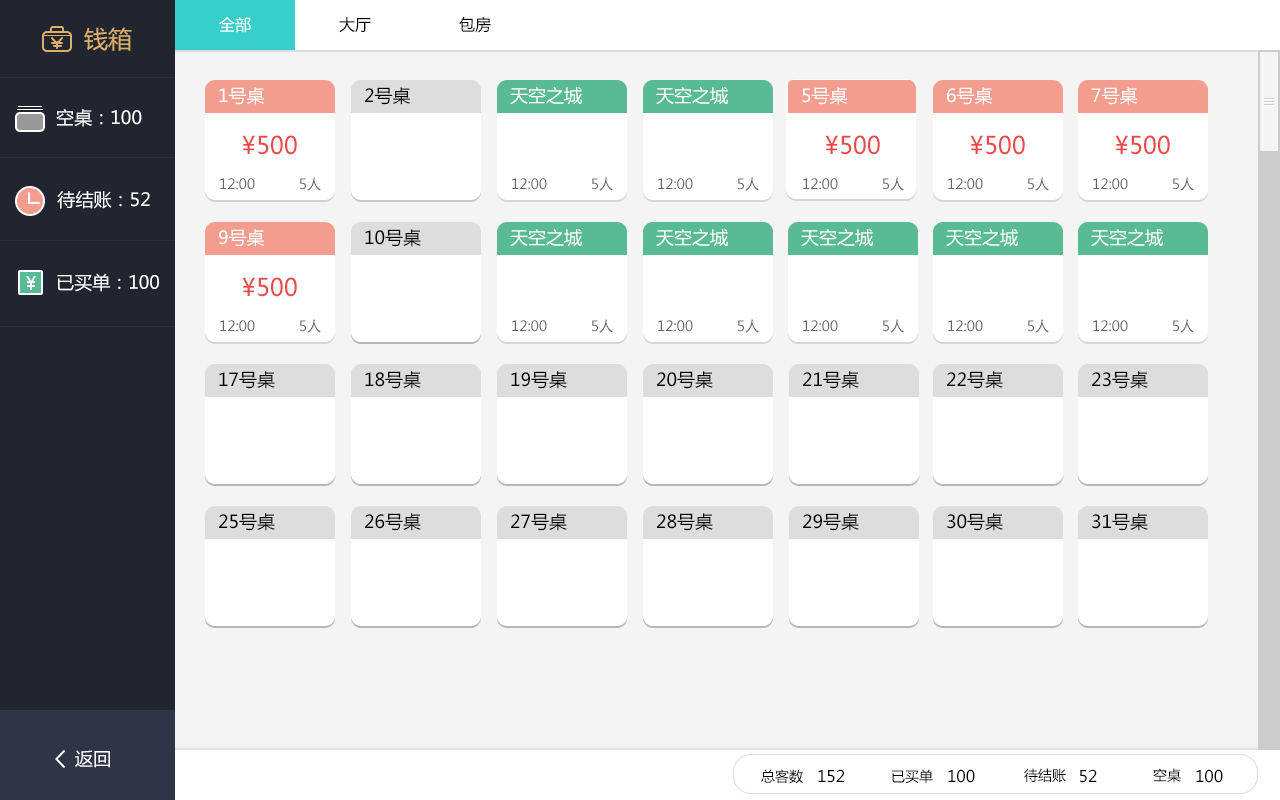
<style>
.page{position:relative;width:1280px;height:800px;background:#ffffff}
.page>*{position:absolute;margin:0}
.t1{font:16px "MicrosoftYaHei";color:#ffffff}
.t2{font:16px "MicrosoftYaHei";color:#000000}
.t3{font:24px "MicrosoftYaHei";color:#dcaf69}
.t4{font:18px "MicrosoftYaHei";color:#ffffff}
.t5{font:18px "MicrosoftYaHei";color:#000000}
.t6{font:24px "MicrosoftYaHei";color:#ec4848}
.t7{font:14px "MicrosoftYaHei";color:#666666}
.t8{font:14px "MicrosoftYaHei";color:#000000}
</style>
<div class="page">
<p class="t1" style="left:219px;top:17px;width:32px;height:16px">全部</p>
<p class="t2" style="left:339px;top:17px;width:32px;height:16px">大厅</p>
<p class="t2" style="left:459px;top:17px;width:32px;height:16px">包房</p>
<p class="t3" style="left:84px;top:27px;width:48px;height:24px">钱箱</p>
<p class="t4" style="left:219px;top:87px;width:46px;height:18px">1号桌</p>
<p class="t5" style="left:365px;top:87px;width:46px;height:18px">2号桌</p>
<p class="t4" style="left:510px;top:86px;width:72px;height:19px">天空之城</p>
<p class="t4" style="left:656px;top:86px;width:72px;height:19px">天空之城</p>
<p class="t4" style="left:802px;top:87px;width:46px;height:18px">5号桌</p>
<p class="t4" style="left:947px;top:87px;width:46px;height:18px">6号桌</p>
<p class="t4" style="left:1091px;top:87px;width:47px;height:18px">7号桌</p>
<p class="t4" style="left:56px;top:109px;width:86px;height:18px">空桌：100</p>
<p class="t6" style="left:242px;top:135px;width:55px;height:20px">¥500</p>
<p class="t6" style="left:825px;top:135px;width:55px;height:20px">¥500</p>
<p class="t6" style="left:970px;top:135px;width:55px;height:20px">¥500</p>
<p class="t6" style="left:1115px;top:135px;width:55px;height:20px">¥500</p>
<p class="t7" style="left:220px;top:178px;width:35px;height:12px">12:00</p>
<p class="t7" style="left:300px;top:177px;width:21px;height:14px">5人</p>
<p class="t7" style="left:512px;top:178px;width:35px;height:12px">12:00</p>
<p class="t7" style="left:592px;top:177px;width:21px;height:14px">5人</p>
<p class="t7" style="left:658px;top:178px;width:35px;height:12px">12:00</p>
<p class="t7" style="left:738px;top:177px;width:21px;height:14px">5人</p>
<p class="t7" style="left:803px;top:178px;width:35px;height:12px">12:00</p>
<p class="t7" style="left:883px;top:177px;width:21px;height:14px">5人</p>
<p class="t7" style="left:948px;top:178px;width:35px;height:12px">12:00</p>
<p class="t7" style="left:1028px;top:177px;width:21px;height:14px">5人</p>
<p class="t7" style="left:1093px;top:178px;width:35px;height:12px">12:00</p>
<p class="t7" style="left:1173px;top:177px;width:21px;height:14px">5人</p>
<p class="t4" style="left:57px;top:191px;width:93px;height:18px">待结账：52</p>
<p class="t4" style="left:219px;top:229px;width:46px;height:18px">9号桌</p>
<p class="t5" style="left:365px;top:229px;width:56px;height:18px">10号桌</p>
<p class="t4" style="left:510px;top:228px;width:72px;height:19px">天空之城</p>
<p class="t4" style="left:656px;top:228px;width:72px;height:19px">天空之城</p>
<p class="t4" style="left:801px;top:228px;width:72px;height:19px">天空之城</p>
<p class="t4" style="left:946px;top:228px;width:72px;height:19px">天空之城</p>
<p class="t4" style="left:1091px;top:228px;width:72px;height:19px">天空之城</p>
<p class="t4" style="left:57px;top:273px;width:102px;height:19px">已买单：100</p>
<p class="t6" style="left:242px;top:277px;width:55px;height:20px">¥500</p>
<p class="t7" style="left:220px;top:320px;width:35px;height:12px">12:00</p>
<p class="t7" style="left:300px;top:319px;width:21px;height:14px">5人</p>
<p class="t7" style="left:512px;top:320px;width:35px;height:12px">12:00</p>
<p class="t7" style="left:592px;top:319px;width:21px;height:14px">5人</p>
<p class="t7" style="left:658px;top:320px;width:35px;height:12px">12:00</p>
<p class="t7" style="left:738px;top:319px;width:21px;height:14px">5人</p>
<p class="t7" style="left:803px;top:320px;width:35px;height:12px">12:00</p>
<p class="t7" style="left:883px;top:319px;width:21px;height:14px">5人</p>
<p class="t7" style="left:948px;top:320px;width:35px;height:12px">12:00</p>
<p class="t7" style="left:1028px;top:319px;width:21px;height:14px">5人</p>
<p class="t7" style="left:1093px;top:320px;width:35px;height:12px">12:00</p>
<p class="t7" style="left:1173px;top:319px;width:21px;height:14px">5人</p>
<p class="t5" style="left:219px;top:371px;width:56px;height:18px">17号桌</p>
<p class="t5" style="left:365px;top:371px;width:56px;height:18px">18号桌</p>
<p class="t5" style="left:511px;top:371px;width:56px;height:18px">19号桌</p>
<p class="t5" style="left:657px;top:371px;width:56px;height:18px">20号桌</p>
<p class="t5" style="left:803px;top:371px;width:56px;height:18px">21号桌</p>
<p class="t5" style="left:947px;top:371px;width:56px;height:18px">22号桌</p>
<p class="t5" style="left:1092px;top:371px;width:56px;height:18px">23号桌</p>
<p class="t5" style="left:219px;top:513px;width:56px;height:18px">25号桌</p>
<p class="t5" style="left:365px;top:513px;width:56px;height:18px">26号桌</p>
<p class="t5" style="left:511px;top:513px;width:56px;height:18px">27号桌</p>
<p class="t5" style="left:657px;top:513px;width:56px;height:18px">28号桌</p>
<p class="t5" style="left:803px;top:513px;width:56px;height:18px">29号桌</p>
<p class="t5" style="left:947px;top:513px;width:56px;height:18px">30号桌</p>
<p class="t5" style="left:1092px;top:513px;width:56px;height:18px">31号桌</p>
<p class="t4" style="left:75px;top:750px;width:35px;height:18px">返回</p>
<p class="t8" style="left:761px;top:769px;width:42px;height:15px">总客数</p>
<p class="t2" style="left:818px;top:769px;width:26px;height:14px">152</p>
<p class="t8" style="left:892px;top:769px;width:41px;height:15px">已买单</p>
<p class="t2" style="left:948px;top:769px;width:27px;height:14px">100</p>
<p class="t8" style="left:1024px;top:768px;width:42px;height:14px">待结账</p>
<p class="t2" style="left:1080px;top:769px;width:17px;height:14px">52</p>
<p class="t8" style="left:1153px;top:768px;width:28px;height:15px">空桌</p>
<p class="t2" style="left:1196px;top:769px;width:27px;height:14px">100</p>
</div>
